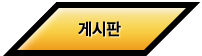
<style>
.page{position:relative;width:202px;height:56px;background:#ffffff}
.page>*{position:absolute;margin:0}
.t1{font:17px "YDIYGO330";letter-spacing:-0.025em;color:#000000;font-weight:bold;scale:0.91 1}
</style>
<div class="page">
<p class="t1" style="left:78px;top:21px;width:43px;height:16px">게시판</p>
</div>
